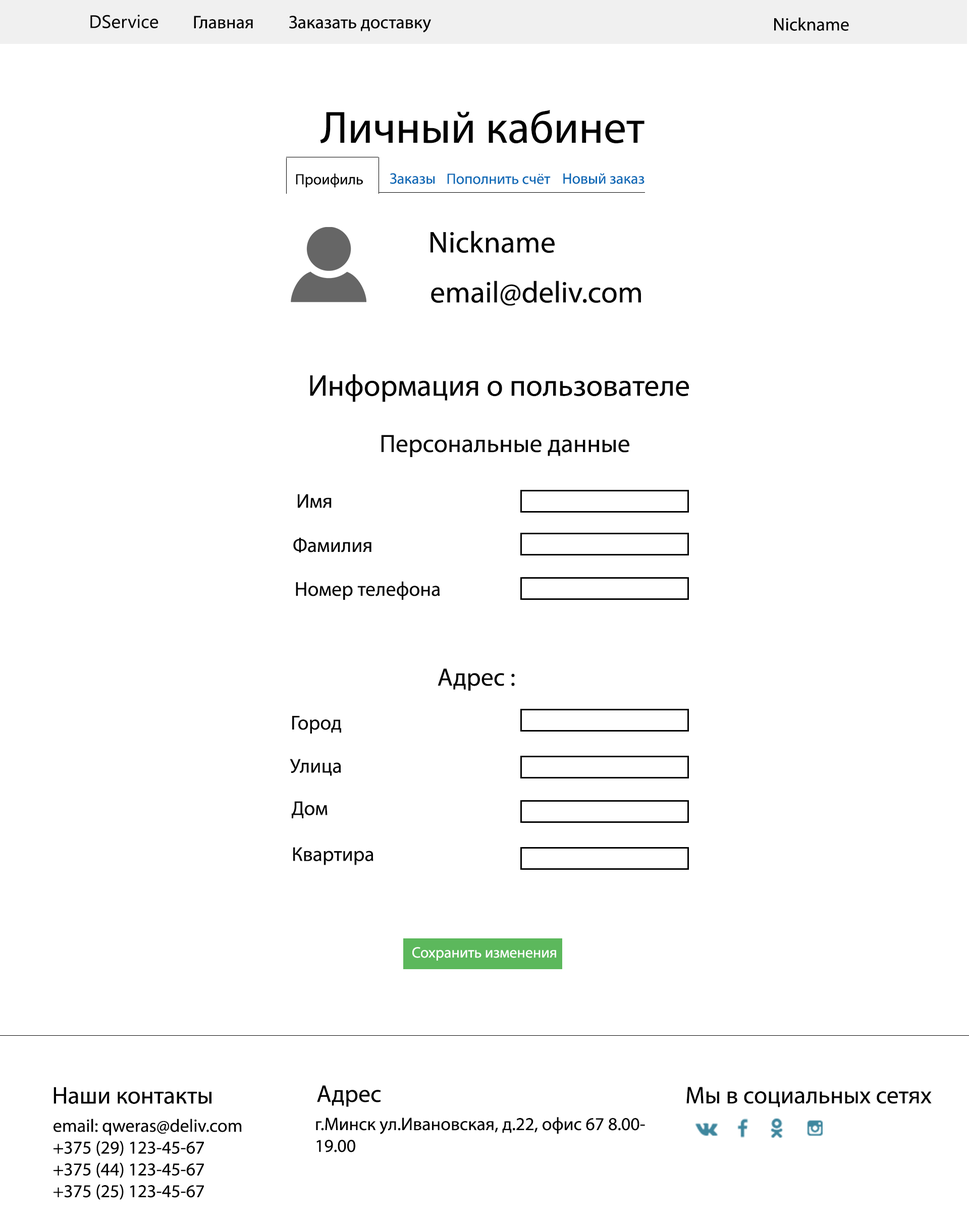
<style>
.page{position:relative;width:969px;height:1231px;background:#ffffff}
.page>*{position:absolute;margin:0}
.t1{font:18.2px "LeelawadeeUI";color:#010101}
.t2{font:18.2px "MyriadPro-Regular";color:#000000}
.t3{font:45.4px "MyriadPro-Regular";color:#000000}
.t4{font:15.1px "MyriadPro-Regular";color:#000000}
.t5{font:15.1px "MyriadPro-Regular";color:#0b69b6}
.t6{font:30.3px "MyriadPro-Regular";color:#040404}
.t7{font:25.2px "MyriadPro-Regular";color:#040404}
.t8{font:20.2px "MyriadPro-Regular";color:#040404}
.t9{font:15.1px "MyriadPro-Regular";color:#ffffff}
.t10{font:24.2px "MyriadPro-Regular";color:#000000}
</style>
<div class="page">
<p class="t1" style="left:90px;top:15px;width:68px;height:13px">DService</p>
<p class="t2" style="left:194px;top:16px;width:59px;height:13px">Главная</p>
<p class="t2" style="left:289px;top:16px;width:142px;height:16px">Заказать доставку</p>
<p class="t2" style="left:774px;top:17px;width:75px;height:14px">Nickname</p>
<p class="t3" style="left:320px;top:110px;width:324px;height:33px">Личный кабинет</p>
<p class="t4" style="left:296px;top:174px;width:67px;height:14px">Проифиль</p>
<p class="t5" style="left:389px;top:173px;width:46px;height:11px">Заказы</p>
<p class="t5" style="left:447px;top:174px;width:103px;height:10px">Пополнить счёт</p>
<p class="t5" style="left:563px;top:173px;width:81px;height:11px">Новый заказ</p>
<p class="t6" style="left:430px;top:231px;width:124px;height:22px">Nickname</p>
<p class="t6" style="left:431px;top:281px;width:210px;height:25px">email@deliv.com</p>
<p class="t6" style="left:310px;top:374px;width:379px;height:28px">Информация о пользователе</p>
<p class="t7" style="left:381px;top:435px;width:248px;height:22px">Персональные данные</p>
<p class="t8" style="left:298px;top:494px;width:33px;height:14px">Имя</p>
<p class="t8" style="left:293px;top:537px;width:78px;height:16px">Фамилия</p>
<p class="t8" style="left:296px;top:581px;width:144px;height:19px">Номер телефона</p>
<p class="t7" style="left:437px;top:668px;width:78px;height:23px">Адрес :</p>
<p class="t8" style="left:292px;top:716px;width:49px;height:18px">Город</p>
<p class="t8" style="left:290px;top:759px;width:51px;height:17px">Улица</p>
<p class="t8" style="left:291px;top:801px;width:36px;height:17px">Дом</p>
<p class="t8" style="left:293px;top:847px;width:80px;height:18px">Квартира</p>
<p class="t9" style="left:412px;top:947px;width:144px;height:14px">Сохранить изменения</p>
<p class="t10" style="left:317px;top:1085px;width:64px;height:22px">Адрес</p>
<p class="t10" style="left:53px;top:1087px;width:158px;height:17px">Наши контакты</p>
<p class="t10" style="left:686px;top:1087px;width:245px;height:20px">Мы в социальных сетях</p>
<p class="t2" style="left:53px;top:1119px;width:189px;height:81px">email: qweras@deliv.com<br>+375 (29) 123-45-67<br>+375 (44) 123-45-67<br>+375 (25) 123-45-67</p>
<p class="t2" style="left:316px;top:1117px;width:329px;height:35px">г.Минск ул.Ивановская, д.22, офис 67 8.00- <br>19.00</p>
</div>
